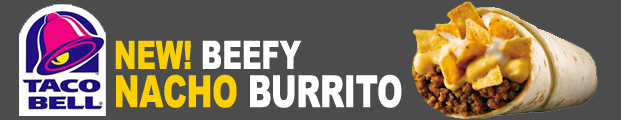
<style>
.page{position:relative;width:621px;height:120px;background:#4c4c4c}
.page>*{position:absolute;margin:0}
.t1{font:44.2px/38.2px "Arial-Black";color:#ffffff;scale:0.7 1}
.t2{font:39.1px/38.2px "Arial-Black";color:#fcd000;scale:0.7 1}
.t3{font:39.1px/38.2px "Arial-Black";color:#ffffff;scale:0.7 1}
.t4{font:44.2px/38.2px "Arial-Black";color:#fcd000;scale:0.7 1}
</style>
<div class="page">
<p class="t1" style="left:115px;top:40px;width:287px;height:68px"><span class="t2">NEW! </span><span class="t3">BEEFY<br></span><span class="t4">NACHO </span>BURRITO</p>
</div>
